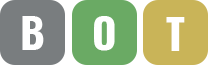
<style>
.page{position:relative;width:208px;height:65px;background:#c9b458}
.page>*{position:absolute;margin:0}
.t1{font:42px "Oswald-Bold";color:#ffffff}
.t2{font:41.8px "Oswald-Bold";color:#ffffff}
</style>
<div class="page">
<p class="t1" style="left:22px;top:16px;width:22px;height:34px">B</p>
<p class="t2" style="left:94px;top:16px;width:21px;height:35px">O</p>
<p class="t2" style="left:166px;top:17px;width:19px;height:34px">T</p>
</div>
